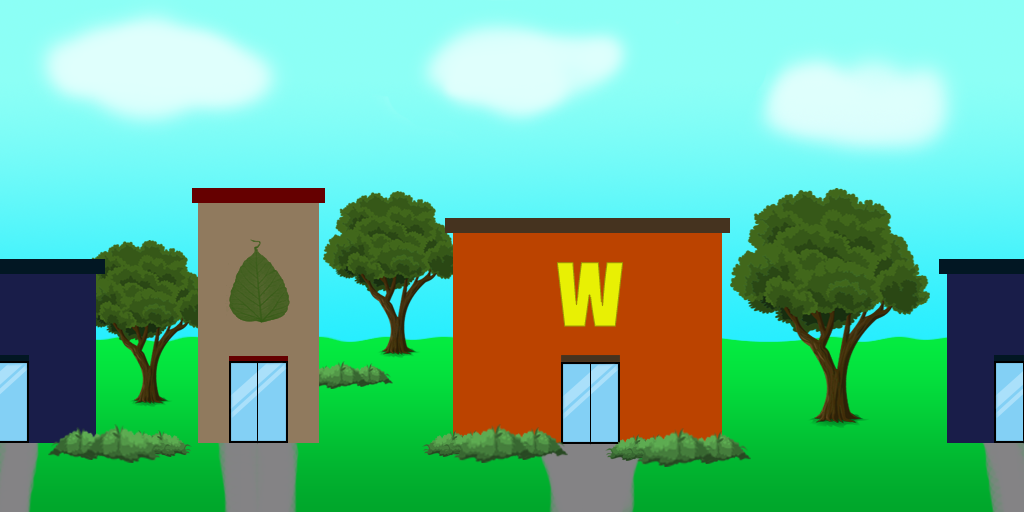
<style>
.page{position:relative;width:1024px;height:512px}
.page>*{position:absolute;margin:0}
.t1{font:80.7px "Impact";color:#e8f004}
</style>
<div class="page">
<p class="t1" style="left:557px;top:262px;width:66px;height:65px">W</p>
</div>
